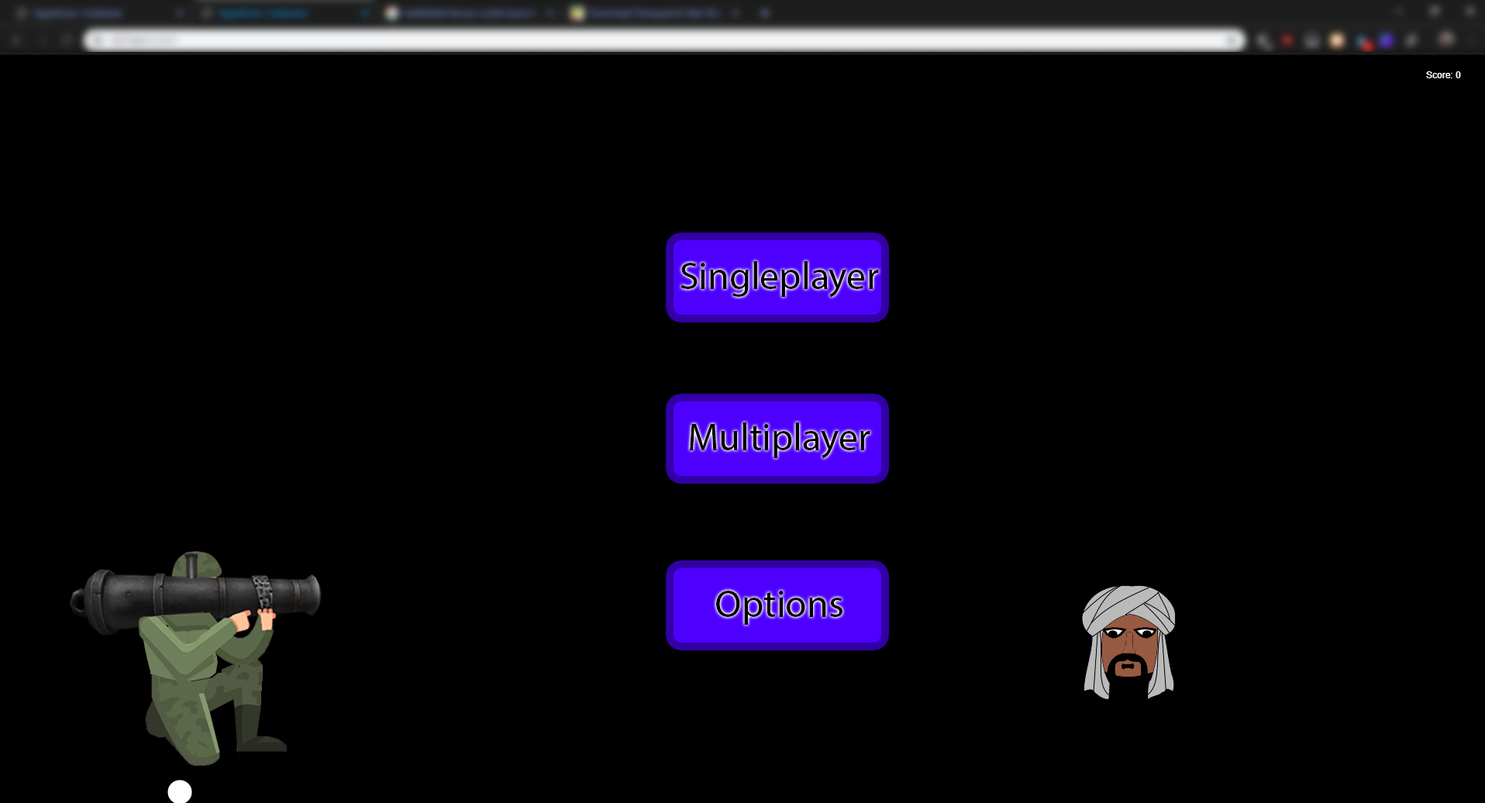
<style>
.page{position:relative;width:1485px;height:803px;background:#000000}
.page>*{position:absolute;margin:0}
.t1{font:38.8px "MyriadPro-Regular";color:#000000}
</style>
<div class="page">
<p class="t1" style="left:681px;top:261px;width:198px;height:37px">Singleplayer</p>
<p class="t1" style="left:690px;top:422px;width:180px;height:37px">Multiplayer</p>
<p class="t1" style="left:716px;top:591px;width:126px;height:34px">Options</p>
</div>
